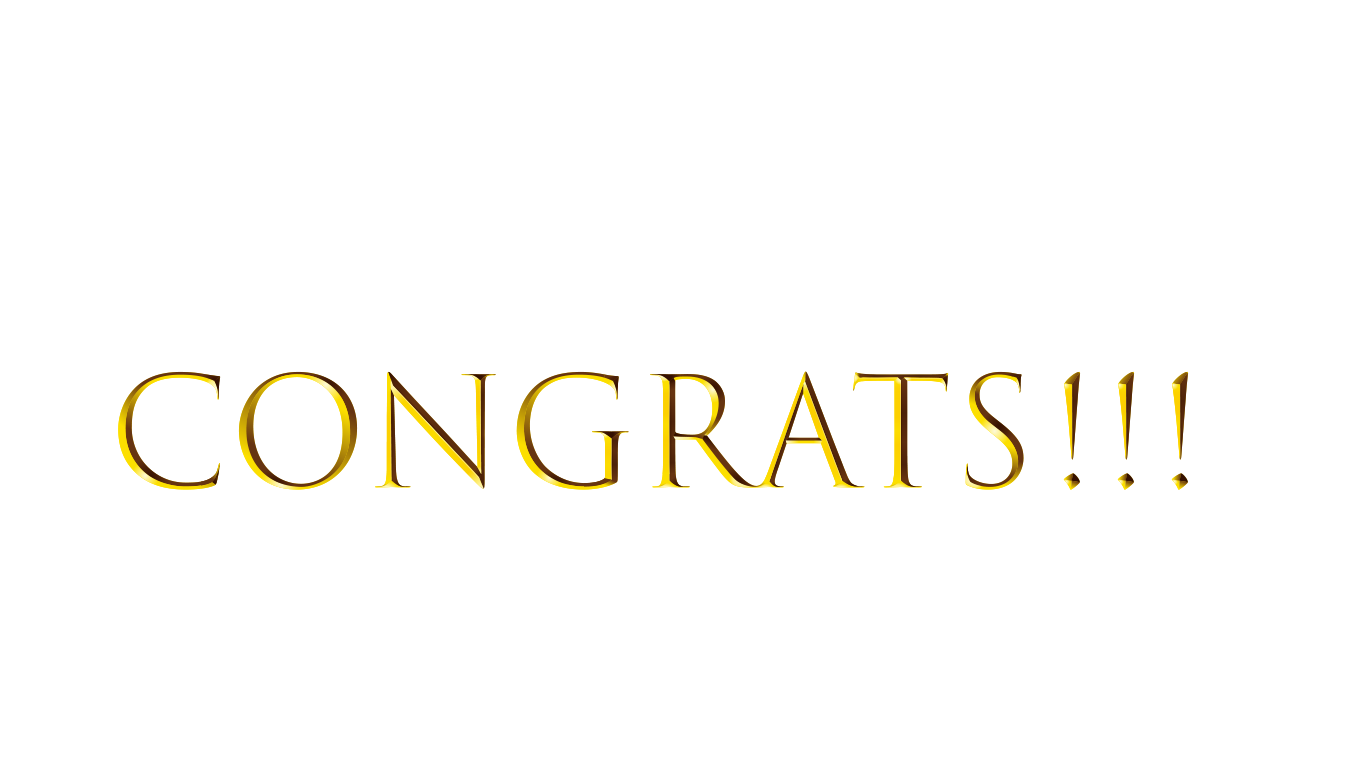
<style>
.page{position:relative;width:1366px;height:768px;background:#ffffff}
.page>*{position:absolute;margin:0}
.t1{font:150px "TrajanColor-Concept"}
</style>
<div class="page">
<p class="t1" style="left:118px;top:371px;width:1071px;height:119px">CONGRATS!!!</p>
</div>
